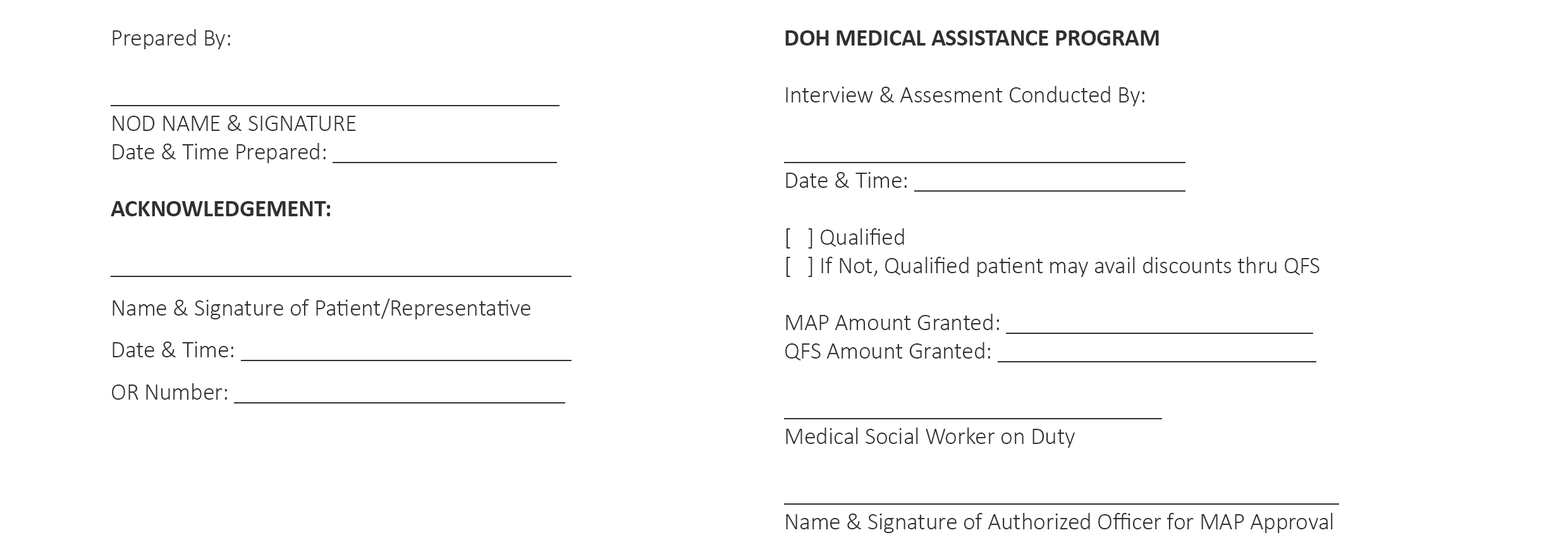
<style>
.page{position:relative;width:1568px;height:554px;background:#ffffff}
.page>*{position:absolute;margin:0}
.t1{font:23.7px/42.2px "Calibri-Light";color:#313131}
.t2{font:23.7px "Calibri-Light";color:#313131}
.t3{font:23.7px "Calibri-Bold";color:#313131}
</style>
<div class="page">
<p class="t1" style="left:110px;top:29px;width:462px;height:374px"><span class="t2">Prepared By: <br><br>______________________________________<br>NOD NAME &amp; SIGNATURE <br>Date &amp; Time Prepared: ___________________<br></span><span class="t3"><br>ACKNOWLEDGEMENT: <br><br></span><span class="t2">_______________________________________<br></span>Name &amp; Signature of Patient/Representative<br>Date &amp; Time: ____________________________<br>OR Number: ____________________________</p>
<p class="t2" style="left:783px;top:30px;width:556px;height:503px"><span class="t3">DOH MEDICAL ASSISTANCE PROGRAM <br><br></span>Interview &amp; Assesment Conducted By: <br><br>__________________________________<br>Date &amp; Time: _______________________<br><br>[   ] Qualified <br>[   ] If Not, Qualified patient may avail discounts thru QFS <br><br>MAP Amount Granted: __________________________ <br>QFS Amount Granted: ___________________________ <br><br>________________________________<br>Medical Social Worker on Duty <br><br>_______________________________________________<br>Name &amp; Signature of Authorized Officer for MAP Approval</p>
</div>
